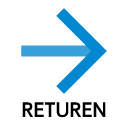
<style>
.page{position:relative;width:128px;height:128px;background:#ffffff}
.page>*{position:absolute;margin:0}
.t1{font:18px "FZCTHJW--GB1-0";color:#000000}
</style>
<div class="page">
<p class="t1" style="left:22px;top:102px;width:84px;height:16px">RETUREN</p>
</div>
